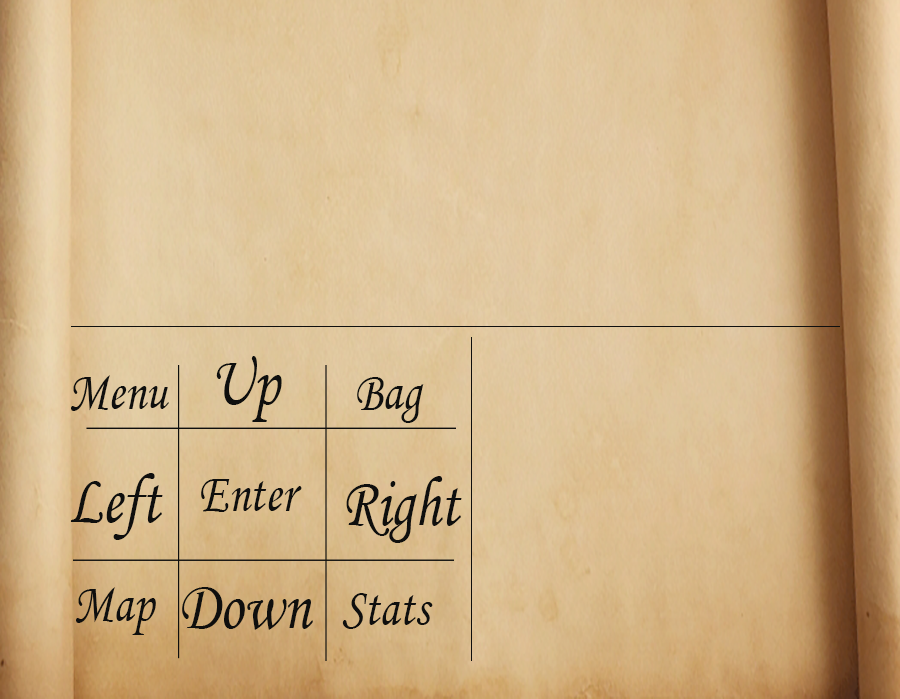
<style>
.page{position:relative;width:900px;height:699px}
.page>*{position:absolute;margin:0}
.t1{font:70.6px "MonotypeCorsiva";color:#0f0f0e;scale:0.84 1}
.t2{font:56.5px "MonotypeCorsiva";color:#0f0f0e;scale:0.84 1}
</style>
<div class="page">
<p class="t1" style="left:216px;top:356px;width:66px;height:66px">Up</p>
<p class="t2" style="left:71px;top:375px;width:98px;height:36px">Menu</p>
<p class="t2" style="left:357px;top:377px;width:67px;height:46px">Bag</p>
<p class="t1" style="left:70px;top:473px;width:93px;height:67px">Left</p>
<p class="t2" style="left:201px;top:479px;width:101px;height:33px">Enter</p>
<p class="t1" style="left:346px;top:476px;width:116px;height:67px">Right</p>
<p class="t2" style="left:76px;top:587px;width:80px;height:48px">Map</p>
<p class="t1" style="left:182px;top:587px;width:131px;height:43px">Down</p>
<p class="t2" style="left:342px;top:593px;width:91px;height:36px">Stats</p>
</div>
